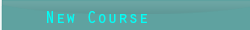
<style>
.page{position:relative;width:250px;height:30px;background:#5fa2a0}
.page>*{position:absolute;margin:0}
.t1{font:16.7px "OratorStd";color:#00fef6;scale:1.04 1}
</style>
<div class="page">
<p class="t1" style="left:47px;top:11px;width:100px;height:12px">New Course</p>
</div>
